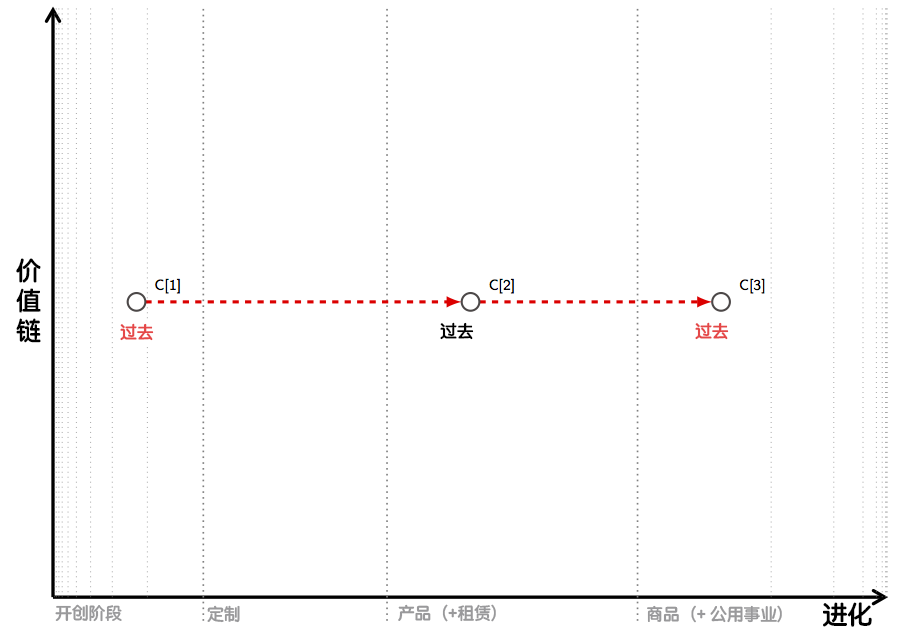
<style>
.page{position:relative;width:914px;height:629px;background:#ffffff}
.page>*{position:absolute;margin:0}
.t1{font:25px "STYuanti-SC-Bold";color:#000000}
.t2{font:16.7px "STYuanti-SC-Bold";color:#e54848}
.t3{font:16.7px "STYuanti-SC-Bold";color:#000000}
.t4{font:16.7px "STYuanti-SC-Bold";color:#99999b}
</style>
<div class="page">
<p class="t1" style="left:16px;top:258px;width:25px;height:85px">价<br>值<br>链</p>
<p class="t2" style="left:120px;top:323px;width:34px;height:18px">过去</p>
<p class="t3" style="left:440px;top:322px;width:34px;height:18px">过去</p>
<p class="t2" style="left:695px;top:322px;width:34px;height:18px">过去</p>
<p class="t4" style="left:55px;top:604px;width:67px;height:18px">开创阶段</p>
<p class="t4" style="left:207px;top:605px;width:33px;height:18px">定制</p>
<p class="t4" style="left:398px;top:604px;width:98px;height:18px">产品（+租赁）</p>
<p class="t4" style="left:647px;top:605px;width:135px;height:18px">商品（+ 公用事业）</p>
<p class="t1" style="left:823px;top:602px;width:49px;height:25px">进化</p>
</div>
